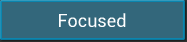
<style>
.page{position:relative;width:187px;height:42px;background:#33677b}
.page>*{position:absolute;margin:0}
.t1{font:18px "Roboto-Regular";color:#ffffff}
</style>
<div class="page">
<p class="t1" style="left:59px;top:13px;width:67px;height:15px">Focused</p>
</div>
